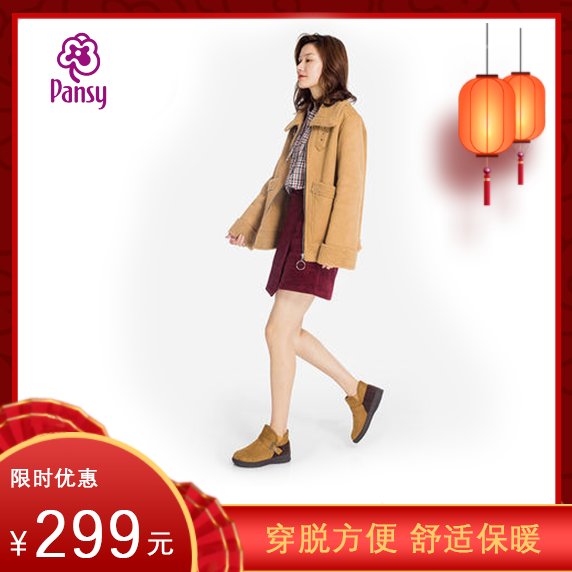
<style>
.page{position:relative;width:572px;height:572px;background:#ffffff}
.page>*{position:absolute;margin:0}
.t1{font:21.3px "DengXian";letter-spacing:0.02em;color:#ffffff;font-weight:bold}
.t2{font:64px "DengXian";letter-spacing:0.02em;color:#ffffff;font-weight:bold}
.t3{font:32px "DengXian";letter-spacing:0.02em;color:#ffffff;font-weight:bold}
.t4{font:26.7px "DengXian";letter-spacing:0.02em;color:#ffffff;font-weight:bold}
.t5{font:32px "DengXian";letter-spacing:0.02em;color:#ffcc67;font-weight:bold}
</style>
<div class="page">
<p class="t1" style="left:11px;top:468px;width:87px;height:20px">限时优惠</p>
<p class="t2" style="left:36px;top:510px;width:103px;height:48px">299</p>
<p class="t3" style="left:10px;top:531px;width:17px;height:25px">￥</p>
<p class="t4" style="left:147px;top:532px;width:27px;height:24px">元</p>
<p class="t5" style="left:266px;top:523px;width:275px;height:31px">穿脱方便 舒适保暖</p>
</div>
